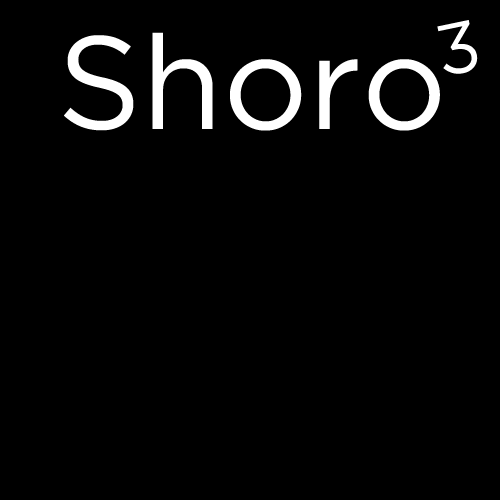
<style>
.page{position:relative;width:500px;height:500px;background:#000000}
.page>*{position:absolute;margin:0}
.t1{font:72px "Gotham-Book";color:#ffffff}
.t2{font:132px "Gotham-Book";color:#ffffff}
</style>
<div class="page">
<p class="t1" style="left:437px;top:20px;width:41px;height:54px;rotate:-12deg">3</p>
<p class="t2" style="left:64px;top:32px;width:376px;height:99px">Shoro</p>
</div>
